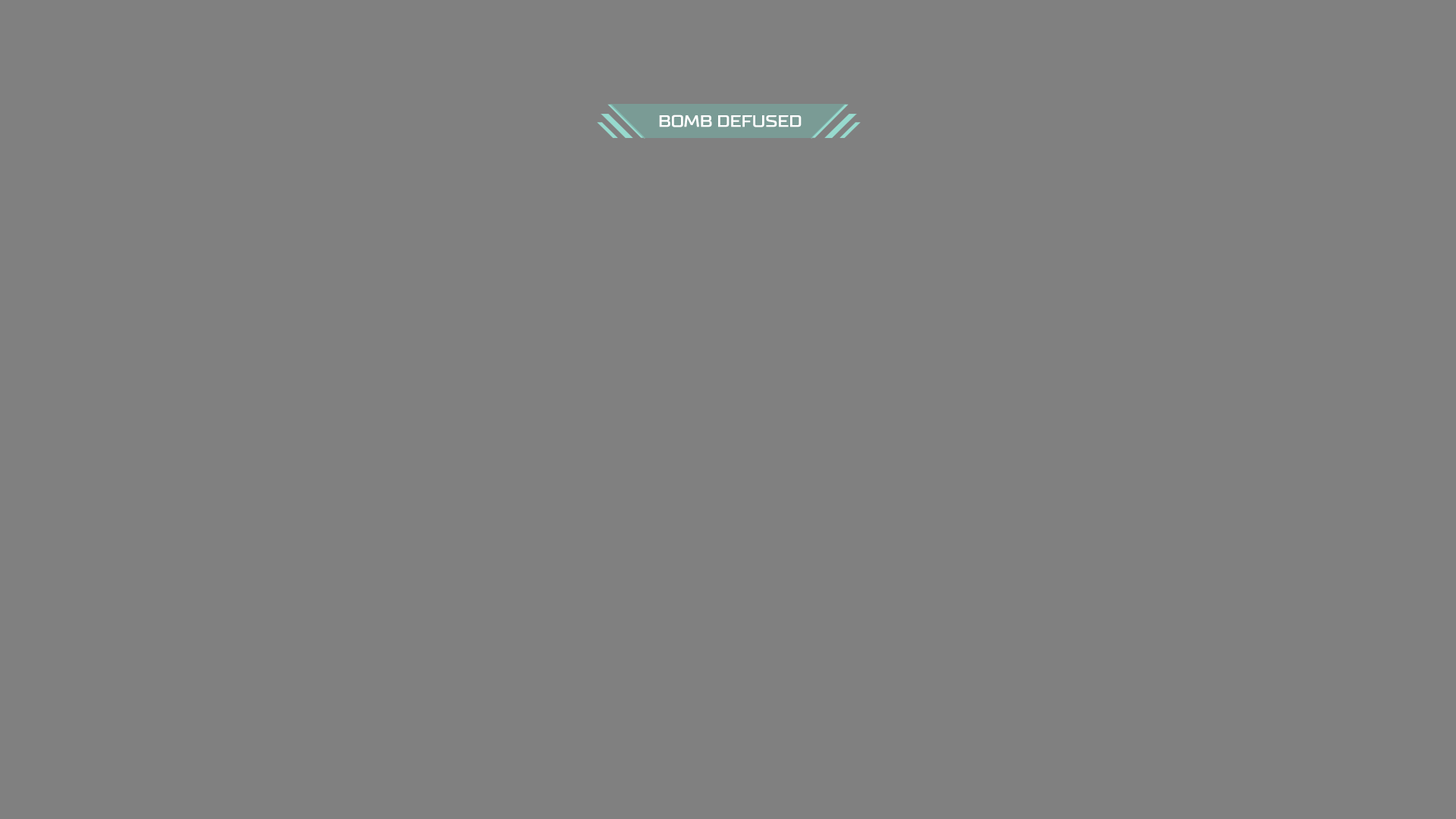
<style>
.page{position:relative;width:1456px;height:819px;background:#808080}
.page>*{position:absolute;margin:0}
.t1{font:16.5px "TTSupermolotNeueExpanded-DmBd";letter-spacing:-0.02em;color:#ffffff;text-transform:uppercase}
</style>
<div class="page">
<p class="t1" style="left:659px;top:115px;width:143px;height:12px">BOMB DEFUSED</p>
</div>
